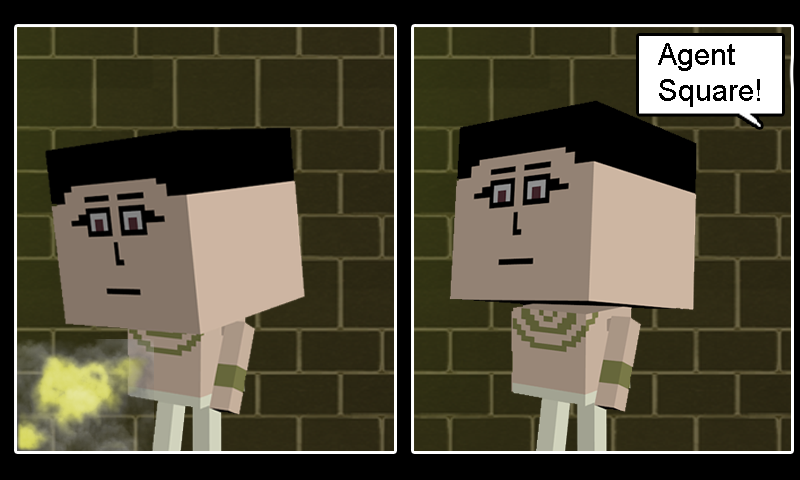
<style>
.page{position:relative;width:800px;height:480px}
.page>*{position:absolute;margin:0}
.t1{font:30px "ArialMT";color:#000000}
</style>
<div class="page">
<p class="t1" style="left:658px;top:43px;width:102px;height:64px">Agent<br>Square!</p>
</div>
